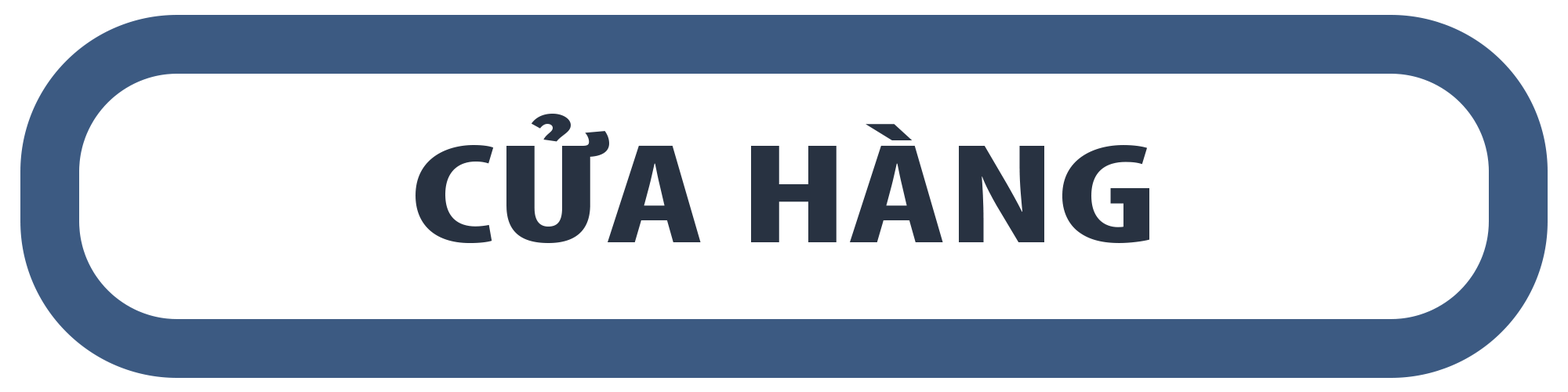
<style>
.page{position:relative;width:1568px;height:392px;background:#ffffff}
.page>*{position:absolute;margin:0}
.t1{font:143.4px "MyriadPro-BoldCond";color:#283241;scale:1.49 1}
</style>
<div class="page">
<p class="t1" style="left:416px;top:114px;width:733px;height:129px">CỬA HÀNG</p>
</div>
